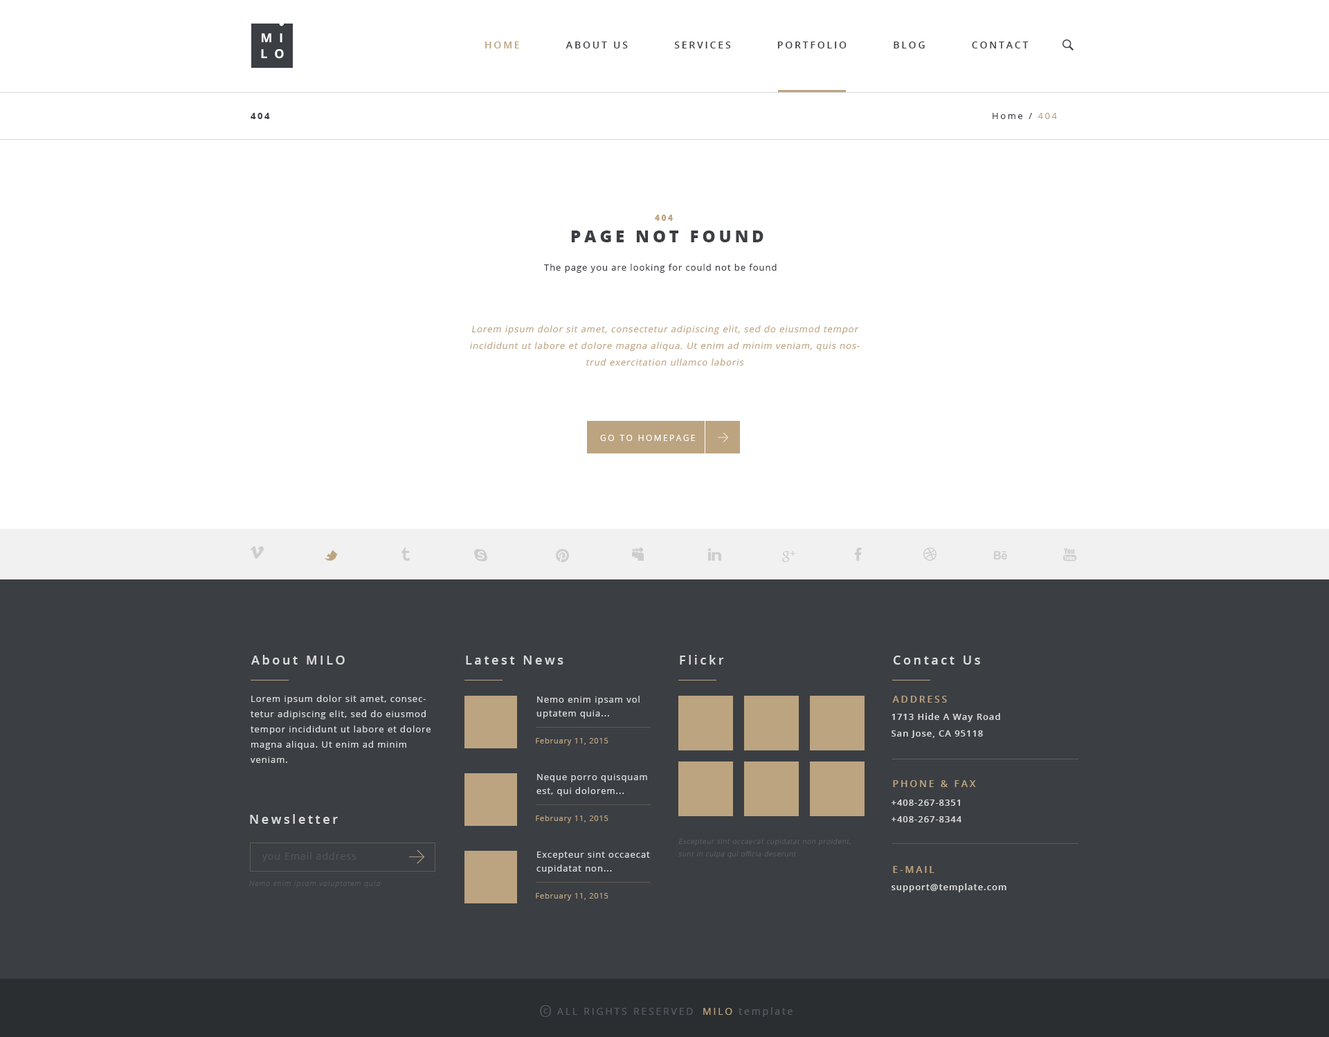
<style>
.page{position:relative;width:1329px;height:1037px;background:#ffffff}
.page>*{position:absolute;margin:0}
.t1{font:12.5px "OpenSans-Bold";letter-spacing:0.55em;color:#ffffff;text-transform:uppercase}
.t2{font:9.7px "OpenSans-Semibold";letter-spacing:0.2em;color:#3b3e43;text-transform:uppercase}
.t3{font:9.7px "OpenSans-Semibold";letter-spacing:0.2em;color:#bca480;text-transform:uppercase}
.t4{font:9px "OpenSans-Bold";letter-spacing:0.2em;color:#3b3e43;text-transform:uppercase}
.t5{font:9px "OpenSans";letter-spacing:0.2em;color:#3b3e43}
.t6{font:9px "OpenSans";letter-spacing:0.2em;color:#bca480}
.t7{font:8.3px "OpenSans-Extrabold";letter-spacing:0.2em;color:#bca480;text-transform:uppercase}
.t8{font:16.6px "OpenSans-Extrabold";letter-spacing:0.2em;color:#3b3e43;text-transform:uppercase}
.t9{font:9px "OpenSans";letter-spacing:0.075em;color:#3b3e43}
.t10{font:9px/16.6px "OpenSans";letter-spacing:0.075em;color:#bca480;font-style:italic}
.t11{font:8.3px "OpenSans";letter-spacing:0.2em;color:#ffffff;text-transform:uppercase}
.t12{font:12.5px "OpenSans-Semibold";letter-spacing:0.2em;color:#dddddd}
.t13{font:9px/15.2px "OpenSans";letter-spacing:0.075em;color:#dddddd}
.t14{font:9px/13.8px "OpenSans";letter-spacing:0.075em;color:#dddddd}
.t15{font:9px/16.6px "OpenSans-Semibold";letter-spacing:0.075em;color:#dddddd}
.t16{font:7.6px "OpenSans";letter-spacing:0.075em;color:#bca480}
.t17{font:6.9px/12.5px "OpenSans-Light";letter-spacing:0.075em;color:#585c62;font-style:italic}
.t18{font:9.7px "OpenSans";letter-spacing:0.075em;color:#505459}
.t19{font:7.6px "OpenSansLight-Italic";letter-spacing:0.075em;color:#53575d}
.t20{font:9px "OpenSans-Semibold";letter-spacing:0.075em;color:#dddddd}
.t21{font:16.6px "OpenSans-Light";letter-spacing:0.2em;color:#585c62;text-transform:uppercase}
.t22{font:6.9px "OpenSans";letter-spacing:0.2em;color:#585c62;text-transform:uppercase}
.t23{font:9.7px "OpenSans";letter-spacing:0.2em;color:#585c62;text-transform:uppercase}
.t24{font:9.7px "OpenSans";letter-spacing:0.2em;color:#585c62}
.t25{font:9.7px "OpenSans";letter-spacing:0.2em;color:#bca480;text-transform:uppercase}
</style>
<div class="page">
<p class="t1" style="left:262px;top:33px;width:20px;height:9px">mi</p>
<p class="t2" style="left:485px;top:42px;width:544px;height:6px"><span class="t3">Home          </span>About Us          Services          Portfolio          Blog          Contact</p>
<p class="t1" style="left:261px;top:49px;width:23px;height:10px">lo</p>
<p class="t4" style="left:251px;top:113px;width:19px;height:6px">404</p>
<p class="t5" style="left:993px;top:113px;width:64px;height:6px">Home / <span class="t6">404</span></p>
<p class="t7" style="left:655px;top:215px;width:18px;height:6px">404</p>
<p class="t8" style="left:571px;top:231px;width:193px;height:11px">PAge not found</p>
<p class="t9" style="left:544px;top:264px;width:233px;height:9px">The page you are looking for could not be found</p>
<p class="t10" style="left:470px;top:325px;width:390px;height:41px;text-align:center">Lorem ipsum dolor sit amet, consectetur adipiscing elit, sed do eiusmod tempor incididunt ut labore et dolore magna aliqua. Ut enim ad minim veniam, quis nostrud exercitation ullamco laboris</p>
<p class="t11" style="left:600px;top:435px;width:95px;height:6px">go to homepage</p>
<p class="t12" style="left:251px;top:655px;width:94px;height:10px">About MILO</p>
<p class="t12" style="left:466px;top:656px;width:98px;height:9px">Latest News</p>
<p class="t12" style="left:680px;top:655px;width:44px;height:10px">Flickr</p>
<p class="t12" style="left:893px;top:656px;width:87px;height:9px">Contact Us</p>
<p class="t13" style="left:251px;top:695px;width:180px;height:68px">Lorem ipsum dolor sit amet, consectetur adipiscing elit, sed do eiusmod tempor incididunt ut labore et dolore magna aliqua. Ut enim ad minim veniam.</p>
<p class="t14" style="left:537px;top:696px;width:103px;height:23px">Nemo enim ipsam vol uptatem quia...</p>
<p class="t3" style="left:892px;top:696px;width:55px;height:7px">Address</p>
<p class="t15" style="left:892px;top:713px;width:108px;height:25px">1713 Hide A Way Road<br>San Jose, CA 95118</p>
<p class="t16" style="left:536px;top:738px;width:73px;height:8px">February 11, 2015</p>
<p class="t14" style="left:537px;top:774px;width:110px;height:22px">Neque porro quisquam est, qui dolorem...</p>
<p class="t3" style="left:893px;top:780px;width:83px;height:7px">Phone &amp; Fax</p>
<p class="t15" style="left:892px;top:800px;width:70px;height:22px">+408-267-8351<br>+408-267-8344</p>
<p class="t12" style="left:250px;top:814px;width:88px;height:10px">Newsletter</p>
<p class="t16" style="left:536px;top:816px;width:73px;height:7px">February 11, 2015</p>
<p class="t17" style="left:678px;top:838px;width:173px;height:20px">Excepteur sint occaecat cupidatat non proident, sunt in culpa qui officia deserunt</p>
<p class="t18" style="left:262px;top:852px;width:95px;height:10px">you Email address</p>
<p class="t14" style="left:537px;top:852px;width:113px;height:22px">Excepteur sint occaecat cupidatat non...</p>
<p class="t3" style="left:893px;top:866px;width:42px;height:7px">E-mail</p>
<p class="t19" style="left:249px;top:881px;width:132px;height:7px">Nemo enim ipsam voluptatem quia</p>
<p class="t16" style="left:536px;top:893px;width:73px;height:8px">February 11, 2015</p>
<p class="t20" style="left:892px;top:883px;width:115px;height:9px">support@template.com</p>
<p class="t21" style="left:540px;top:1005px;width:11px;height:12px">O</p>
<p class="t22" style="left:543px;top:1009px;width:5px;height:5px">c</p>
<p class="t23" style="left:557px;top:1008px;width:136px;height:7px">All Rights Reserved</p>
<p class="t24" style="left:703px;top:1007px;width:90px;height:10px"><span class="t25">MILO </span>template</p>
</div>
